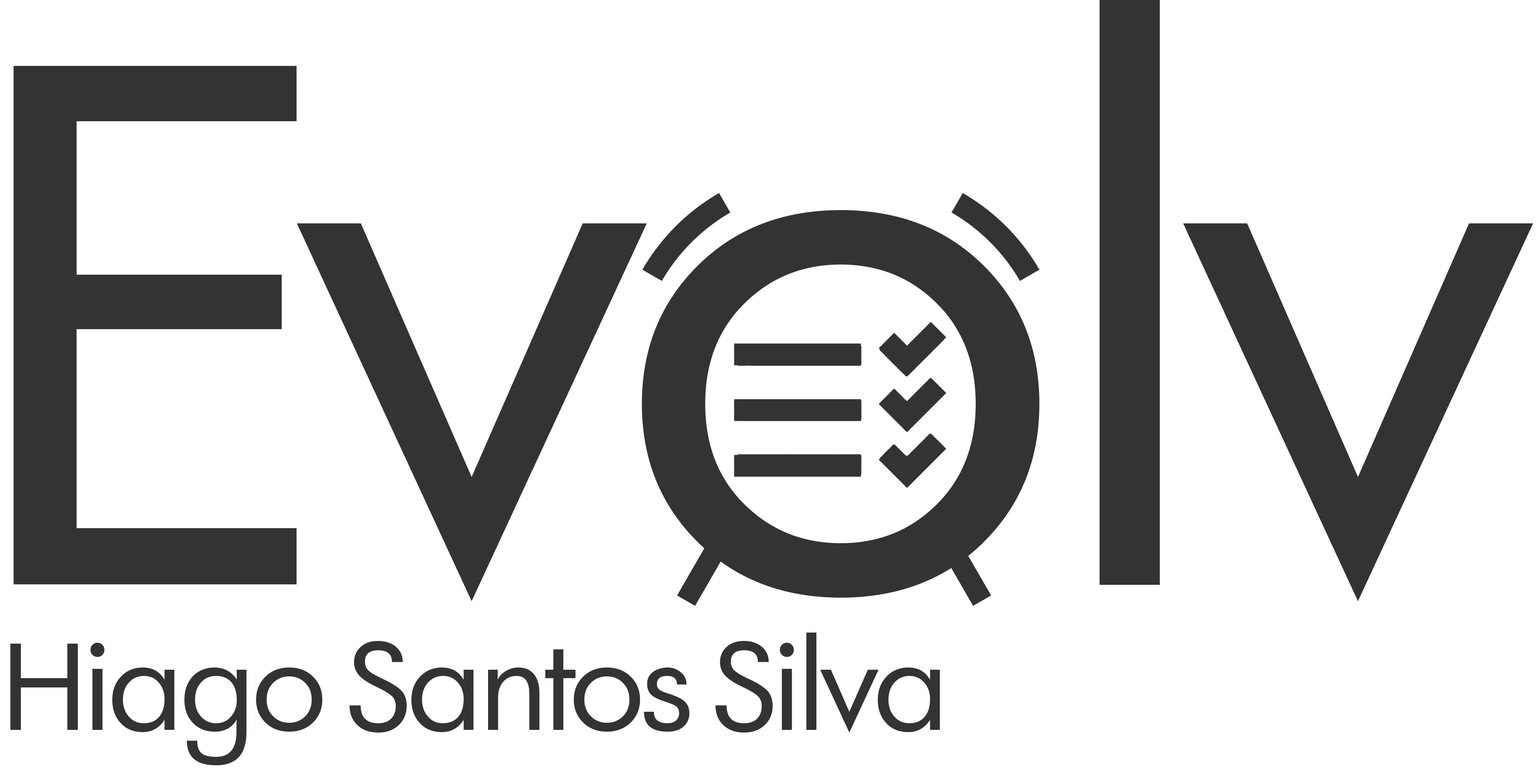
<style>
.page{position:relative;width:1539px;height:775px;background:#ffffff}
.page>*{position:absolute;margin:0}
.t1{font:708.3px "AFuturaOrto";letter-spacing:-0.05em;color:#333333}
.t2{font:118px "AFuturaOrto";letter-spacing:-0.05em;color:#333333}
</style>
<div class="page">
<p class="t1" style="left:13px;top:0px;width:1520px;height:602px">Evolv</p>
<p class="t2" style="left:10px;top:633px;width:930px;height:132px">Hiago Santos Silva</p>
</div>
